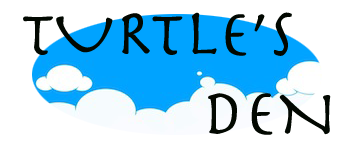
<style>
.page{position:relative;width:363px;height:146px;background:#ffffff}
.page>*{position:absolute;margin:0}
.t1{font:65.9px "Herculanum";color:#020801}
</style>
<div class="page">
<p class="t1" style="left:23px;top:12px;width:308px;height:123px">TURTLE’s <br>     DEN</p>
</div>
